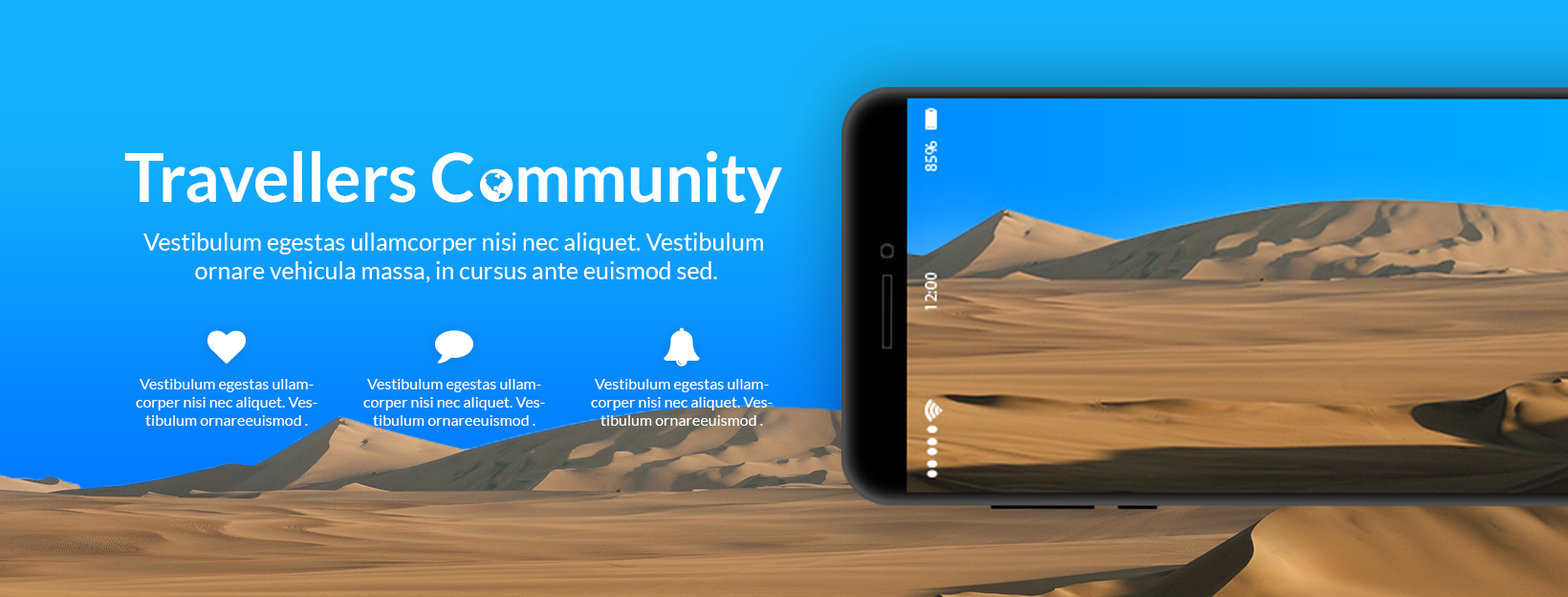
<style>
.page{position:relative;width:1568px;height:597px}
.page>*{position:absolute;margin:0}
.t1{font:66.9px "Lato-Bold";color:#ffffff}
.t2{font:23.9px "Lato-Regular";color:#ffffff}
.t3{font:15.3px "Lato-Regular";color:#ffffff}
</style>
<div class="page">
<p class="t1" style="left:124px;top:151px;width:658px;height:62px">Travellers C   mmunity</p>
<p class="t2" style="left:143px;top:232px;width:620px;height:51px;text-align:center">Vestibulum egestas ullamcorper nisi nec aliquet. Vestibulum <br>ornare vehicula massa, in cursus ante euismod sed.</p>
<p class="t3" style="left:136px;top:379px;width:181px;height:46px;text-align:center">Vestibulum egestas ullamcorper nisi nec aliquet. Vestibulum ornareeuismod .</p>
<p class="t3" style="left:363px;top:379px;width:182px;height:46px;text-align:center">Vestibulum egestas ullamcorper nisi nec aliquet. Vestibulum ornareeuismod .</p>
<p class="t3" style="left:591px;top:379px;width:182px;height:46px;text-align:center">Vestibulum egestas ullamcorper nisi nec aliquet. Vestibulum ornareeuismod .</p>
</div>
